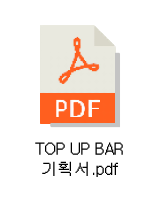
<style>
.page{position:relative;width:160px;height:200px;background:#ffffff}
.page>*{position:absolute;margin:0}
.t1{font:17px "Limgul17-Regular";letter-spacing:-0.025em;color:#000000}
</style>
<div class="page">
<p class="t1" style="left:35px;top:142px;width:88px;height:35px;text-align:center">TOP UP BAR<br>기획서.pdf</p>
</div>
